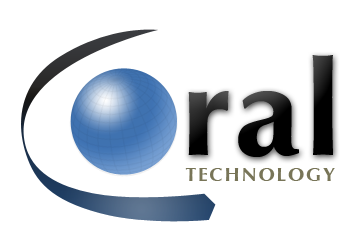
<style>
.page{position:relative;width:360px;height:252px;background:#ffffff}
.page>*{position:absolute;margin:0}
.t1{font:203.4px "IrisUPCBold";letter-spacing:0.02em;color:#000000}
.t2{font:30px "IrisUPCBold";letter-spacing:0.06em;color:#787558}
</style>
<div class="page">
<p class="t1" style="left:188px;top:55px;width:145px;height:102px">ral</p>
<p class="t2" style="left:185px;top:168px;width:150px;height:13px">TECHNOLOGY</p>
</div>
